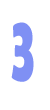
<style>
.page{position:relative;width:50px;height:110px;background:#ffffff}
.page>*{position:absolute;margin:0}
.t1{font:96px "BerlinSansFBDemi-Bold";color:#7f90f4;scale:0.5 1}
</style>
<div class="page">
<p class="t1" style="left:11px;top:22px;width:23px;height:60px">3</p>
</div>
